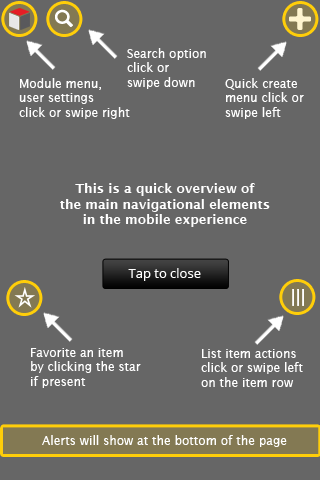
<style>
.page{position:relative;width:320px;height:480px;background:#666666}
.page>*{position:absolute;margin:0}
.t1{font:12px "LucidaSans";color:#ffffff}
.t2{font:13px "LucidaSans-Demi";color:#ffffff}
.t3{font:13px "OpenSans";color:#ffffff}
</style>
<div class="page">
<p class="t1" style="left:127px;top:48px;width:79px;height:41px">Search option <br>click or <br>swipe down</p>
<p class="t1" style="left:19px;top:78px;width:111px;height:41px">Module menu,<br>user settings <br>click or swipe right</p>
<p class="t1" style="left:225px;top:78px;width:79px;height:41px">Quick create<br>menu click or<br>swipe left</p>
<p class="t2" style="left:60px;top:183px;width:210px;height:44px;text-align:center">This is a quick overview of<br>the main navigational elements<br>in the mobile experience</p>
<p class="t3" style="left:128px;top:268px;width:73px;height:13px">Tap to close</p>
<p class="t1" style="left:31px;top:348px;width:110px;height:40px">Favorite an item <br>by clicking the star<br>if present</p>
<p class="t1" style="left:201px;top:349px;width:102px;height:38px">List item actions<br>click or swipe left <br>on the item row</p>
<p class="t1" style="left:42px;top:435px;width:245px;height:12px">Alerts will show at the bottom of the page</p>
</div>
